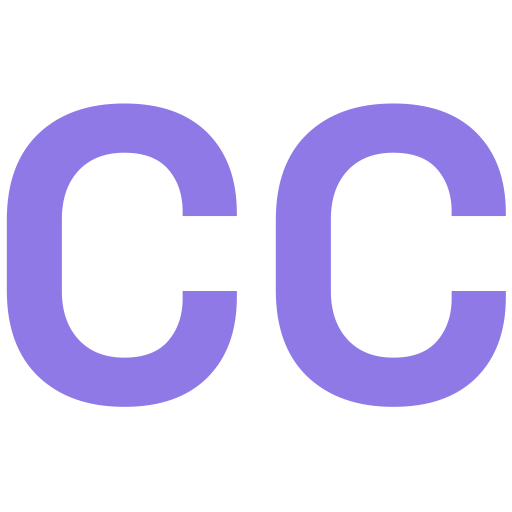
<style>
.page{position:relative;width:512px;height:512px;background:#ffffff}
.page>*{position:absolute;margin:0}
.t1{font:416.7px "SpaceGrotesk-Bold";color:#8f79e6}
</style>
<div class="page">
<p class="t1" style="left:6px;top:103px;width:500px;height:304px">CC</p>
</div>
